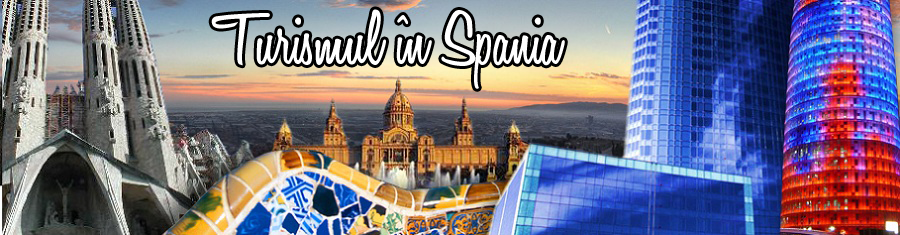
<style>
.page{position:relative;width:900px;height:235px}
.page>*{position:absolute;margin:0}
.t1{font:80px "HoneyScript-SemiBold";color:#ffffff}
</style>
<div class="page">
<p class="t1" style="left:211px;top:9px;width:354px;height:80px">Turismul în Spania</p>
</div>
